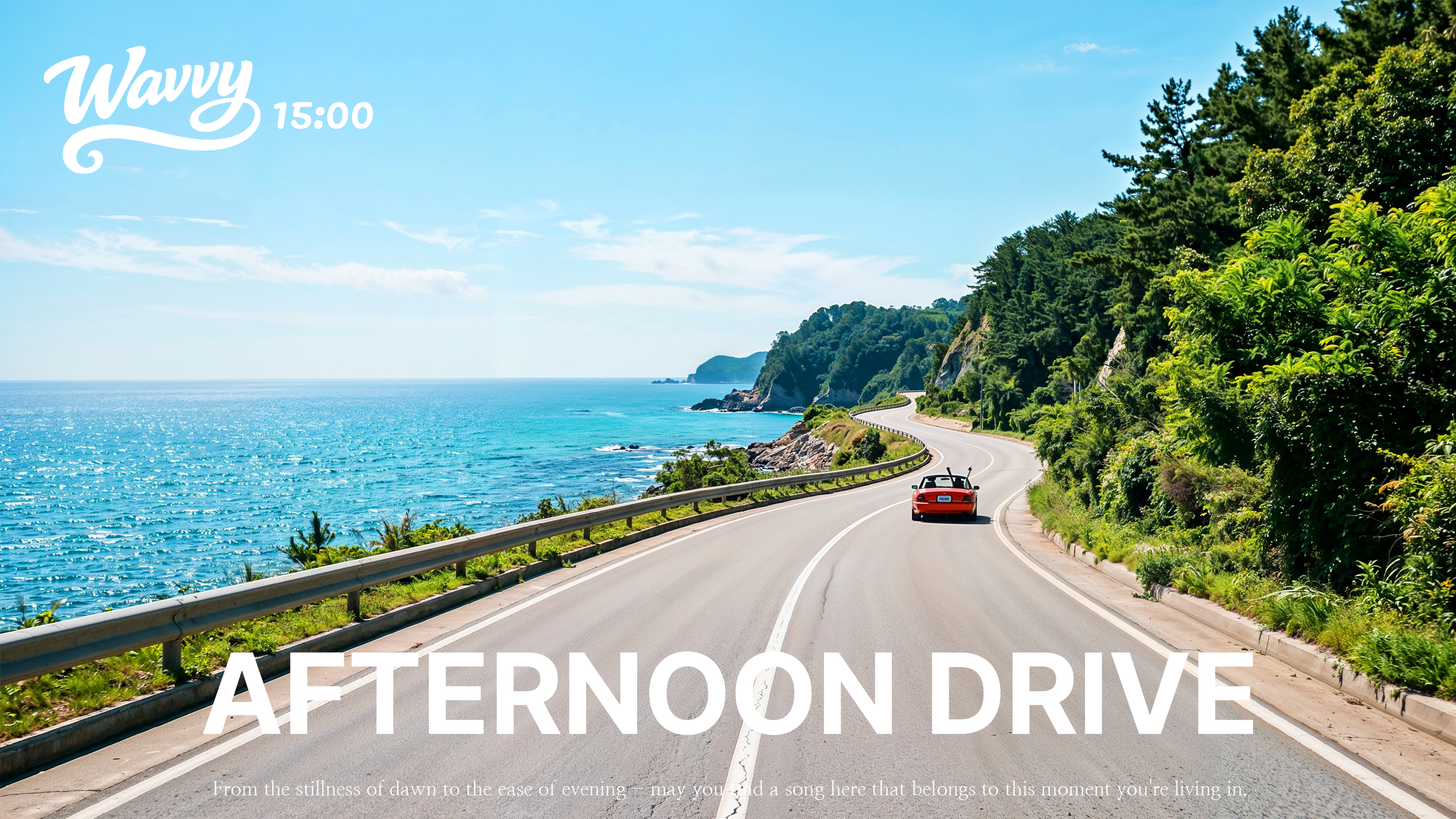
<style>
.page{position:relative;width:1456px;height:819px}
.page>*{position:absolute;margin:0}
.t1{font:46px "Pacifico-Regular";color:#ffffff}
.t2{font:115px "Pretendard-Bold";color:#ffffff}
.t3{font:19.6px "NanumMyeongjo";color:#ffffff}
</style>
<div class="page">
<p class="t1" style="left:274px;top:102px;width:99px;height:27px">15:00</p>
<p class="t2" style="left:202px;top:651px;width:1052px;height:84px">AFTERNOON DRIVE</p>
<p class="t3" style="left:213px;top:779px;width:1034px;height:21px">From the stillness of dawn to the ease of evening - may you find a song here that belongs to this moment you're living in.</p>
</div>
